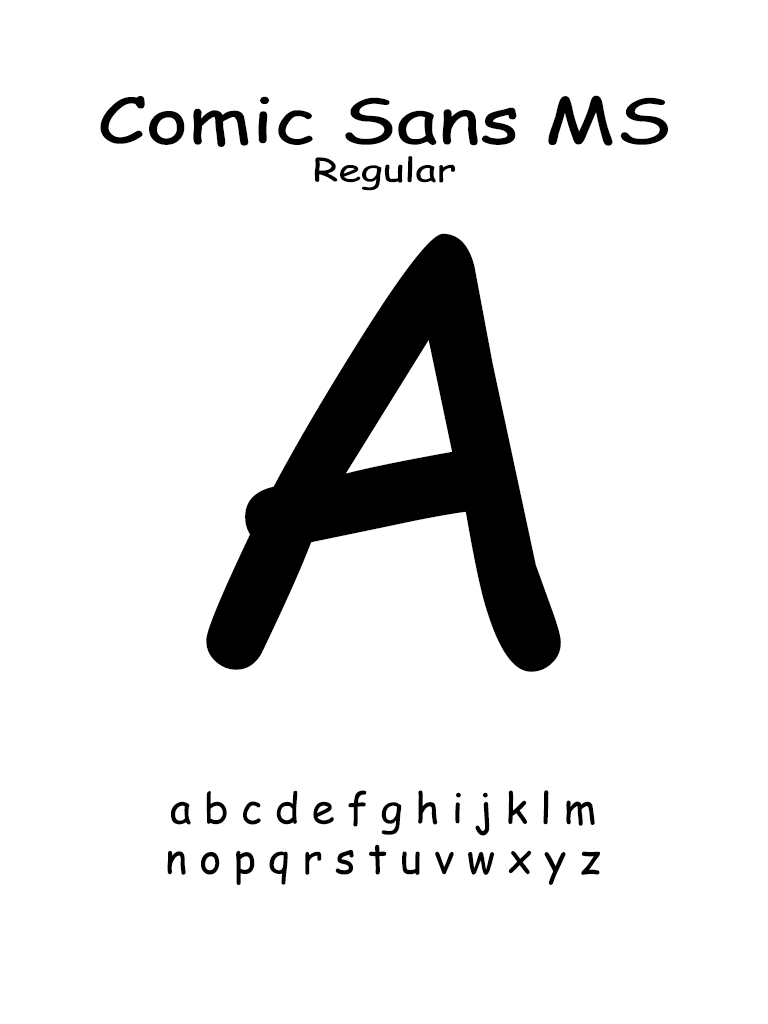
<style>
.page{position:relative;width:768px;height:1024px;background:#ffffff}
.page>*{position:absolute;margin:0}
.t1{font:63px "ComicSansMS";color:#000000;scale:1.29 1}
.t2{font:32px "ComicSansMS";color:#000000;scale:1.29 1}
.t3{font:594.5px "ComicSansMS";color:#000000}
.t4{font:41.7px "ComicSansMS";color:#000000}
</style>
<div class="page">
<p class="t1" style="left:100px;top:95px;width:568px;height:96px;text-align:center">Comic Sans MS<br><span class="t2">Regular</span></p>
<p class="t3" style="left:206px;top:233px;width:355px;height:439px">A</p>
<p class="t4" style="left:167px;top:790px;width:433px;height:96px;text-align:center">a b c d e f g h i j k l m<br>n o p q r s t u v w x y z</p>
</div>
